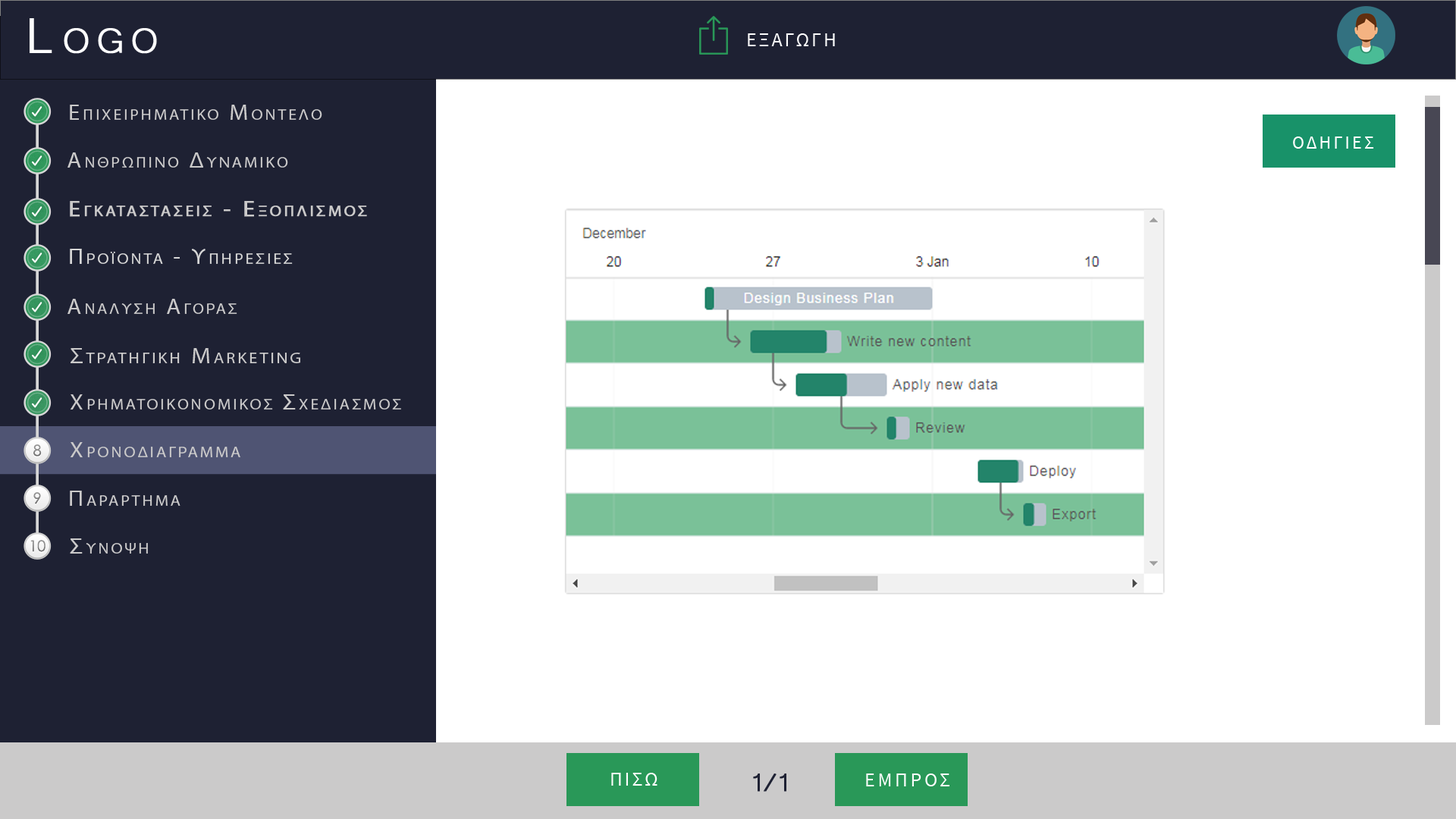
<style>
.page{position:relative;width:1456px;height:819px;background:#ffffff}
.page>*{position:absolute;margin:0}
.t1{font:63.7px "Microsoft-Yi-Baiti";letter-spacing:0.13em;color:#ffffff;font-variant:small-caps;font-weight:bold}
.t2{font:20px "SourceSansPro-Regular";letter-spacing:0.1em;color:#fefefe;text-transform:uppercase}
.t3{font:21.7px "MyriadPro-Regular";letter-spacing:0.13em;color:#cbcaca;font-variant:small-caps;scale:1.09 1}
.t4{font:23.4px "Microsoft-Yi-Baiti";letter-spacing:0.13em;color:#cbcaca;font-variant:small-caps;font-weight:bold}
.t5{font:18.2px "SourceSansPro-Regular";letter-spacing:0.13em;color:#ffffff;text-transform:uppercase}
.t6{font:21.7px/91px "MyriadPro-Regular";letter-spacing:0.13em;color:#cbcaca;font-variant:small-caps;font-weight:bold;scale:1.09 1}
.t7{font:23.4px/91px "Microsoft-Yi-Baiti";letter-spacing:0.13em;color:#cbcaca;font-variant:small-caps;font-weight:bold}
.t8{font:21.7px "MyriadPro-Regular";letter-spacing:0.13em;color:#d6d6d6;font-variant:small-caps;scale:1.09 1}
.t9{font:23.4px "Microsoft-Yi-Baiti";letter-spacing:0.13em;color:#d6d6d6;font-variant:small-caps;font-weight:bold}
.t10{font:22.2px "MyriadPro-Regular";letter-spacing:0.13em;color:#cbcaca;font-variant:small-caps;scale:1.09 1}
.t11{font:25.5px "Microsoft-Yi-Baiti";letter-spacing:0.13em;color:#cbcaca;font-variant:small-caps;font-weight:bold}
.t12{font:15.3px "CenturyGothic";color:#8b8b8b}
.t13{font:15.3px "CenturyGothic";color:#838383}
.t14{font:23.7px "Microsoft-Yi-Baiti";letter-spacing:0.13em;color:#cbcaca;font-variant:small-caps;scale:1.09 1}
.t15{font:15.3px "CenturyGothic";color:#878787}
.t16{font:32.8px "Microsoft-Yi-Baiti";letter-spacing:-0.1em;color:#1e2133;font-weight:bold}
.t17{font:20px "SourceSansPro-Regular";letter-spacing:0.13em;color:#fefefe;text-transform:uppercase}
</style>
<div class="page">
<p class="t1" style="left:30px;top:18px;width:127px;height:36px">Logo</p>
<p class="t2" style="left:748px;top:33px;width:87px;height:13px">εξαγωγη</p>
<p class="t3" style="left:70px;top:105px;width:252px;height:15px"><span class="t4">   </span>Επιχειρηματικο Μοντελο</p>
<p class="t5" style="left:1293px;top:136px;width:81px;height:13px">Οδηγιεσ</p>
<p class="t3" style="left:67px;top:152px;width:221px;height:16px"><span class="t4">   </span>Ανθρωπινο Δυναμικο</p>
<p class="t6" style="left:70px;top:201px;width:297px;height:16px"><span class="t7">   </span>Εγκαταστασεισ - Εξοπλισμοσ<br><br><span class="t7">Equipment</span></p>
<p class="t8" style="left:70px;top:249px;width:223px;height:15px"><span class="t9">   </span>Προϊοντα - Υπηρεσιεσ</p>
<p class="t3" style="left:67px;top:299px;width:170px;height:15px"><span class="t4">   </span>Αναλυση Αγορασ</p>
<p class="t10" style="left:71px;top:348px;width:229px;height:15px"><span class="t11">   </span>Στρατηγικη Marketing</p>
<p class="t3" style="left:70px;top:394px;width:331px;height:15px"><span class="t11">   </span>Χρηματοικονομικοσ Σχεδιασμοσ</p>
<p class="t12" style="left:33px;top:444px;width:9px;height:13px">8</p>
<p class="t3" style="left:70px;top:442px;width:170px;height:15px"><span class="t11">   </span>Χρονοδιαγραμμα</p>
<p class="t13" style="left:33px;top:492px;width:8px;height:12px">9</p>
<p class="t3" style="left:70px;top:491px;width:110px;height:15px"><span class="t14">   </span>Παραρτημα</p>
<p class="t15" style="left:30px;top:540px;width:15px;height:12px">10</p>
<p class="t3" style="left:70px;top:538px;width:78px;height:16px"><span class="t14">   </span>Συνοψη</p>
<p class="t2" style="left:611px;top:773px;width:46px;height:13px">Πισω</p>
<p class="t16" style="left:753px;top:773px;width:33px;height:19px">1/1</p>
<p class="t17" style="left:866px;top:773px;width:83px;height:13px">εμπροσ</p>
</div>
